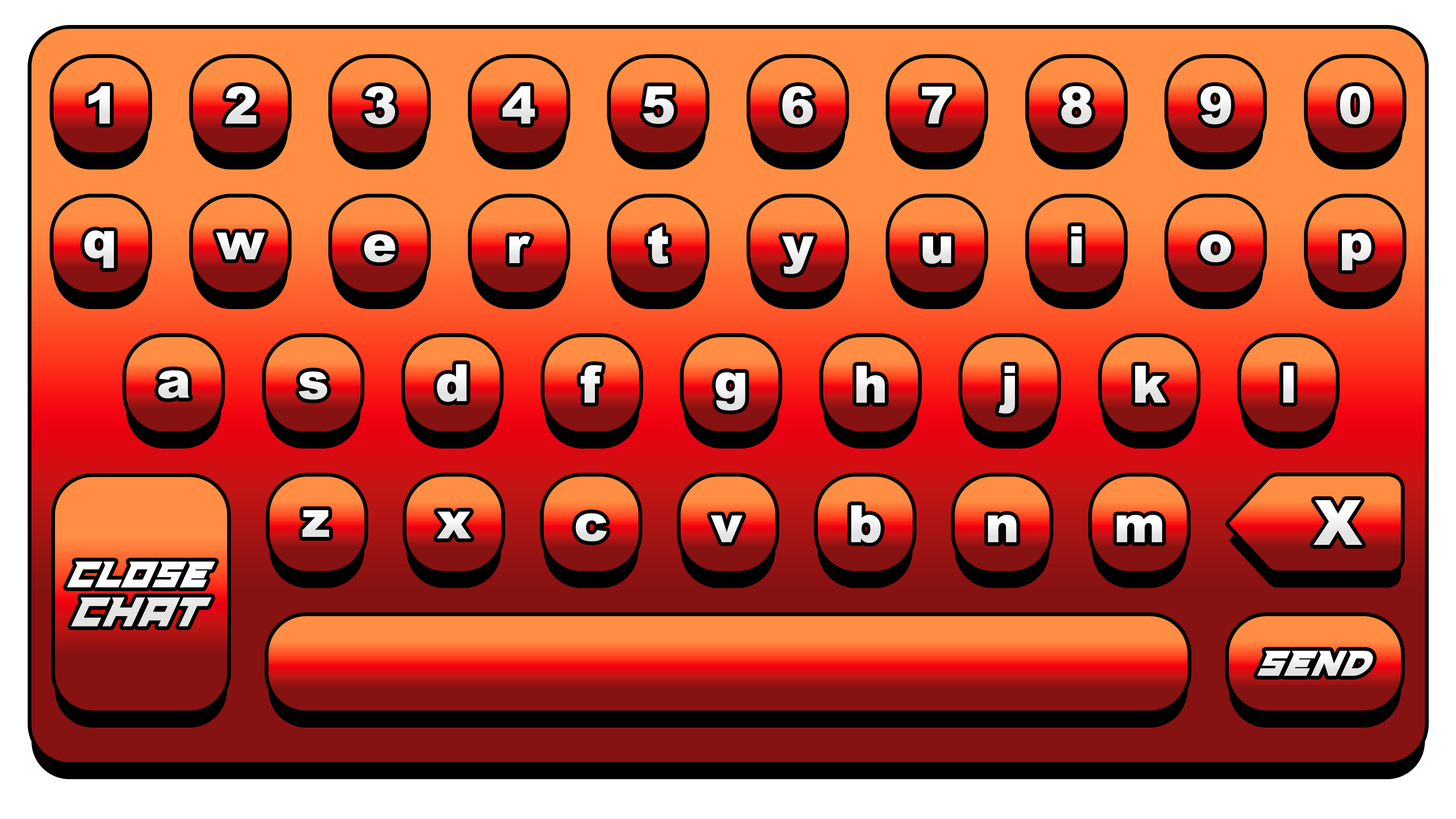
<style>
.page{position:relative;width:1456px;height:819px}
.page>*{position:absolute;margin:0}
.t1{font:51.4px "Arial-Black";color:#f7f7f7;text-transform:uppercase}
.t2{font:51.4px "Arial-Black";color:#efefef;text-transform:uppercase}
.t3{font:51.4px "Arial-Black";color:#f1f1f1;text-transform:uppercase}
.t4{font:51.4px "Arial-Black";color:#ededed;text-transform:uppercase}
.t5{font:51.4px "Arial-Black";color:#f4f4f4;text-transform:uppercase}
.t6{font:51.4px "Arial-Black";color:#fefefe;text-transform:uppercase}
.t7{font:51.4px "Arial-Black";color:#f2f2f2;text-transform:uppercase}
.t8{font:51.4px "Arial-Black";color:#f5f5f5}
.t9{font:51.4px "Arial-Black";color:#f3f3f3}
.t10{font:51.4px "Arial-Black";color:#efefef}
.t11{font:51.4px "Arial-Black";color:#f2f2f2}
.t12{font:51.4px "Arial-Black";color:#f8f8f8}
.t13{font:51.4px "Arial-Black";color:#f6f6f6}
.t14{font:51.4px "Arial-Black";color:#f0f0f0}
.t15{font:51.4px "Arial-Black";color:#eeeeee}
.t16{font:51.4px "Arial-Black";color:#ededed}
.t17{font:62.4px "Arial-Black";color:#f1f1f1;text-transform:uppercase}
.t18{font:51.4px "Arial-Black";color:#f1f1f1}
.t19{font:51.4px "Arial-Black";color:#f4f4f4}
.t20{font:53.6px/38.9px "SpeedRunDemoRegular";color:#f8f8f8}
.t21{font:59.9px/38.9px "SpeedRunDemoRegular";color:#f8f8f8}
.t22{font:51.7px "SpeedRunDemoRegular";color:#f2f2f2;text-transform:uppercase}
</style>
<div class="page">
<p class="t1" style="left:88px;top:86px;width:22px;height:38px">1</p>
<p class="t2" style="left:225px;top:86px;width:31px;height:38px">2</p>
<p class="t3" style="left:364px;top:86px;width:31px;height:38px">3</p>
<p class="t4" style="left:502px;top:86px;width:33px;height:38px">4</p>
<p class="t5" style="left:643px;top:86px;width:31px;height:38px">5</p>
<p class="t3" style="left:782px;top:86px;width:31px;height:38px">6</p>
<p class="t6" style="left:922px;top:86px;width:30px;height:38px">7</p>
<p class="t3" style="left:1061px;top:86px;width:31px;height:38px">8</p>
<p class="t7" style="left:1200px;top:86px;width:31px;height:38px">9</p>
<p class="t7" style="left:1340px;top:86px;width:30px;height:38px">0</p>
<p class="t8" style="left:84px;top:230px;width:30px;height:38px">q</p>
<p class="t9" style="left:216px;top:232px;width:49px;height:27px">w</p>
<p class="t9" style="left:364px;top:234px;width:31px;height:28px">e</p>
<p class="t9" style="left:648px;top:226px;width:20px;height:38px">t</p>
<p class="t10" style="left:1071px;top:226px;width:11px;height:37px">i</p>
<p class="t11" style="left:1200px;top:234px;width:31px;height:28px">o</p>
<p class="t8" style="left:1342px;top:232px;width:29px;height:38px">p</p>
<p class="t12" style="left:509px;top:235px;width:21px;height:28px">r</p>
<p class="t13" style="left:782px;top:236px;width:32px;height:38px">y</p>
<p class="t14" style="left:923px;top:236px;width:28px;height:28px">u</p>
<p class="t10" style="left:437px;top:364px;width:30px;height:38px">d</p>
<p class="t13" style="left:580px;top:365px;width:22px;height:38px">f</p>
<p class="t14" style="left:856px;top:366px;width:29px;height:37px">h</p>
<p class="t15" style="left:998px;top:366px;width:17px;height:48px">j</p>
<p class="t16" style="left:1135px;top:366px;width:32px;height:37px">k</p>
<p class="t11" style="left:1283px;top:366px;width:11px;height:37px">l</p>
<p class="t14" style="left:158px;top:370px;width:31px;height:28px">a</p>
<p class="t11" style="left:299px;top:371px;width:28px;height:29px">s</p>
<p class="t9" style="left:715px;top:372px;width:30px;height:39px">g</p>
<p class="t10" style="left:302px;top:510px;width:27px;height:27px">z</p>
<p class="t10" style="left:851px;top:505px;width:30px;height:38px">b</p>
<p class="t17" style="left:1313px;top:500px;width:49px;height:45px">X</p>
<p class="t18" style="left:437px;top:511px;width:34px;height:27px">x</p>
<p class="t11" style="left:576px;top:513px;width:31px;height:28px">c</p>
<p class="t8" style="left:711px;top:515px;width:31px;height:27px">v</p>
<p class="t19" style="left:988px;top:515px;width:29px;height:27px">n</p>
<p class="t19" style="left:1117px;top:515px;width:45px;height:27px">m</p>
<p class="t20" style="left:67px;top:562px;width:148px;height:64px;text-align:center">CLOSE<br><span class="t21">CHAT</span></p>
<p class="t22" style="left:1257px;top:651px;width:116px;height:25px">Send</p>
</div>
